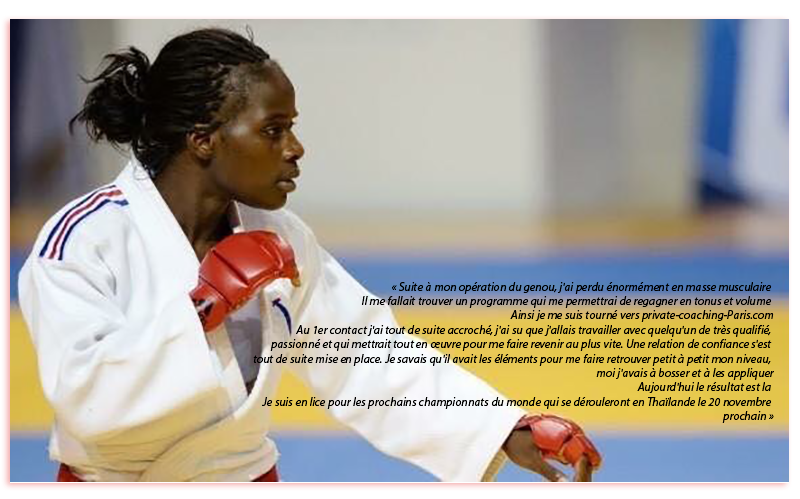
<style>
.page{position:relative;width:800px;height:499px}
.page>*{position:absolute;margin:0}
.t1{font:12px "MyriadHebrew-It";color:#000000}
</style>
<div class="page">
<p class="t1" style="left:253px;top:282px;width:521px;height:141px;text-align:right">« Suite à mon opération du genou, j'ai perdu énormément en masse musculaire <br>Il me fallait trouver un programme qui me permettrai de regagner en tonus et volume <br>Ainsi je me suis tourné vers private-coaching-Paris.com<br>Au 1er contact j'ai tout de suite accroché, j'ai su que j'allais travailler avec quelqu'un de très qualifié, <br>passionné et qui mettrait tout en œuvre pour me faire revenir au plus vite. Une relation de confiance s'est <br>tout de suite mise en place. Je savais qu'il avait les éléments pour me faire retrouver petit à petit mon niveau, <br>moi j'avais à bosser et à les appliquer<br>Aujourd'hui le résultat est la <br>Je suis en lice pour les prochains championnats du monde qui se dérouleront en Thaïlande le 20 novembre <br>prochain »</p>
</div>
